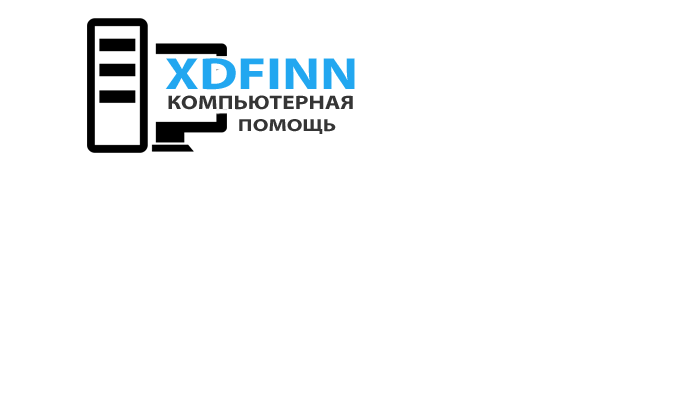
<style>
.page{position:relative;width:700px;height:403px;background:#ffffff}
.page>*{position:absolute;margin:0}
.t1{font:45.4px "MyriadPro-Bold";color:#22a7f0;text-transform:uppercase;scale:1.22 1}
.t2{font:19.8px "MyriadPro-Bold";color:#353535;text-transform:uppercase;scale:1.19 1}
.t3{font:17.4px "MyriadPro-Bold";color:#353535;text-transform:uppercase;scale:1.26 1}
</style>
<div class="page">
<p class="t1" style="left:165px;top:58px;width:190px;height:32px">xdfinn</p>
<p class="t2" style="left:168px;top:95px;width:185px;height:15px">Компьютерная</p>
<p class="t3" style="left:239px;top:119px;width:97px;height:15px">помощь</p>
</div>
